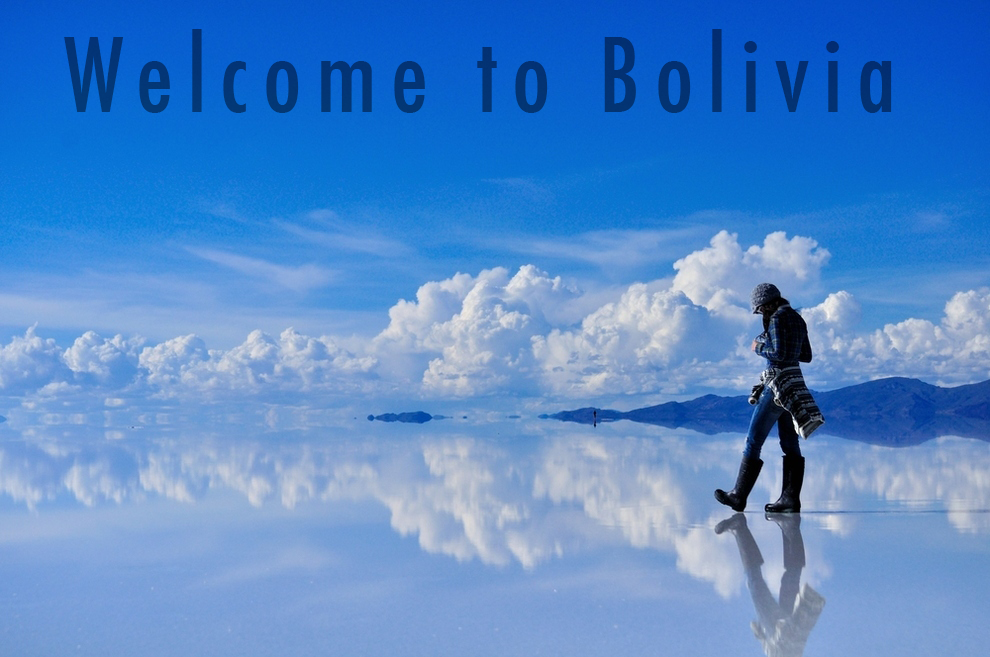
<style>
.page{position:relative;width:990px;height:657px}
.page>*{position:absolute;margin:0}
.t1{font:100px "Futura-CondensedMedium";letter-spacing:0.14em;color:#033374}
</style>
<div class="page">
<p class="t1" style="left:64px;top:29px;width:828px;height:84px">Welcome to Bolivia</p>
</div>
